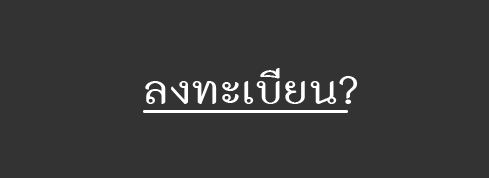
<style>
.page{position:relative;width:489px;height:178px;background:#333333}
.page>*{position:absolute;margin:0}
.t1{font:58.3px "THK2DJuly8-Bold";color:#ffffff}
</style>
<div class="page">
<p class="t1" style="left:145px;top:68px;width:213px;height:36px">ลงทะเบียน?</p>
</div>
